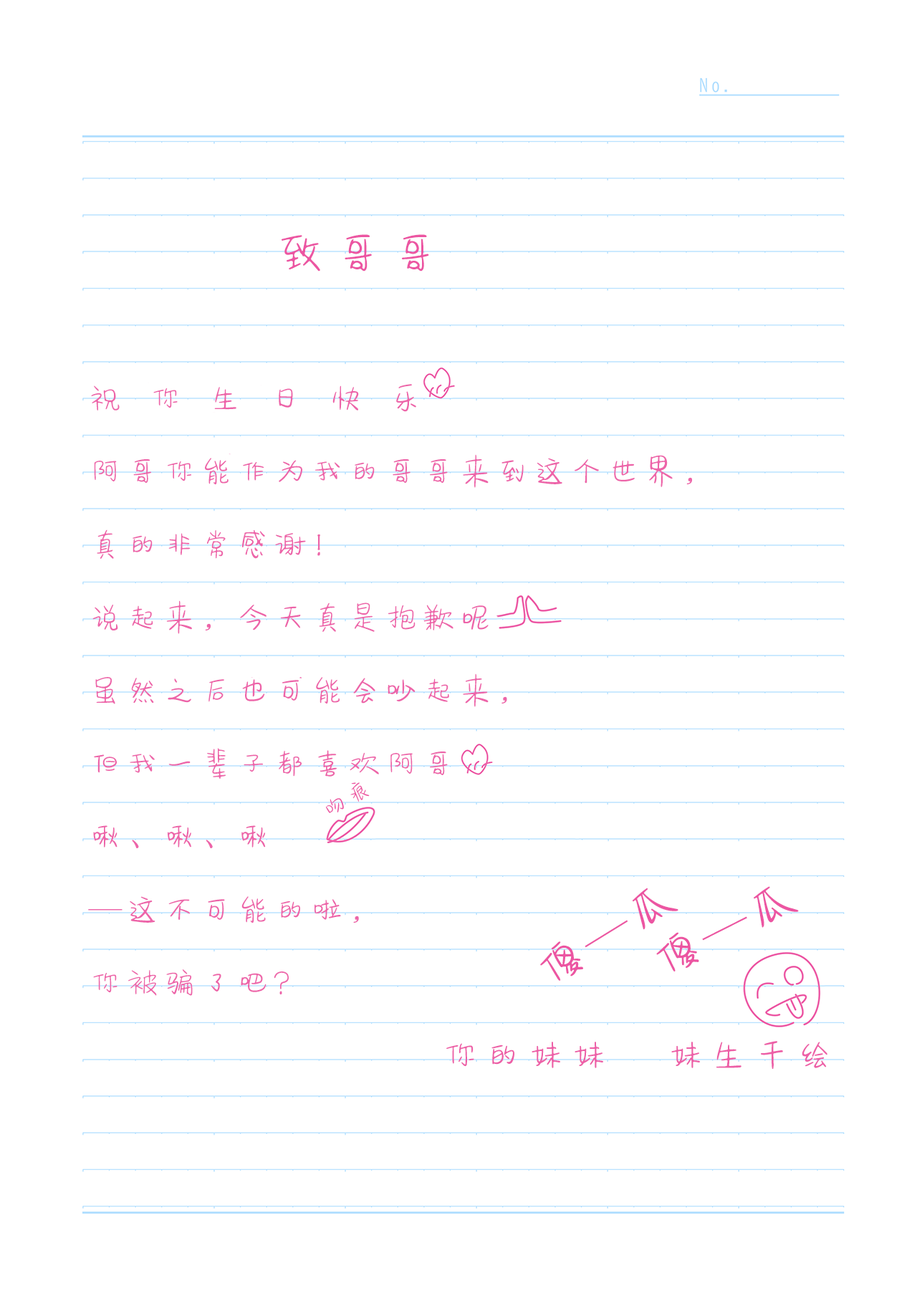
<style>
.page{position:relative;width:917px;height:1301px;background:#ffffff}
.page>*{position:absolute;margin:0}
.t1{font:52.3px "FZSEYBJW--GB1-0";letter-spacing:0.09em;color:#ec55a2}
.t2{font:34px/73.1px "FZSEYBJW--GB1-0";letter-spacing:0.09em;color:#ed64a9}
.t3{font:24.6px "FZSEYBJW--GB1-0";letter-spacing:0.09em;color:#ec55a2}
.t4{font:49.4px "FZSEYBJW--GB1-0";letter-spacing:0.09em;color:#ec55a2}
.t5{font:39.4px "FZSEYBJW--GB1-0";letter-spacing:0.09em;color:#ed5fa7}
</style>
<div class="page">
<p class="t1" style="left:281px;top:234px;width:148px;height:37px">致哥哥</p>
<p class="t2" style="left:88px;top:384px;width:604px;height:612px">祝  你  生  日  快  乐<br>阿哥你能作为我的哥哥来到这个世界，<br>真的非常感谢！<br>说起来，今天真是抱歉呢<br>虽然之后也可能会吵起来，<br>但我一辈子都喜欢阿哥<br>啾、啾、啾 <br>—这不可能的啦，<br>你被骗了吧？</p>
<p class="t3" style="left:326px;top:782px;width:44px;height:31px;rotate:-32deg">吻痕</p>
<p class="t4" style="left:540px;top:887px;width:138px;height:94px;rotate:-32deg">傻—瓜</p>
<p class="t4" style="left:656px;top:886px;width:143px;height:85px;rotate:-27deg">傻—瓜</p>
<p class="t5" style="left:446px;top:1041px;width:381px;height:28px">你的妹妹    妹生千绘</p>
</div>
